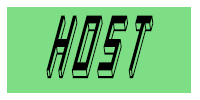
<style>
.page{position:relative;width:200px;height:100px;background:#7dde85}
.page>*{position:absolute;margin:0}
.t1{font:62.5px "Italic-Bricks";letter-spacing:0.2em;color:#000000;text-transform:uppercase;font-style:italic;scale:0.4 1}
</style>
<div class="page">
<p class="t1" style="left:46px;top:15px;width:108px;height:64px">host</p>
</div>
